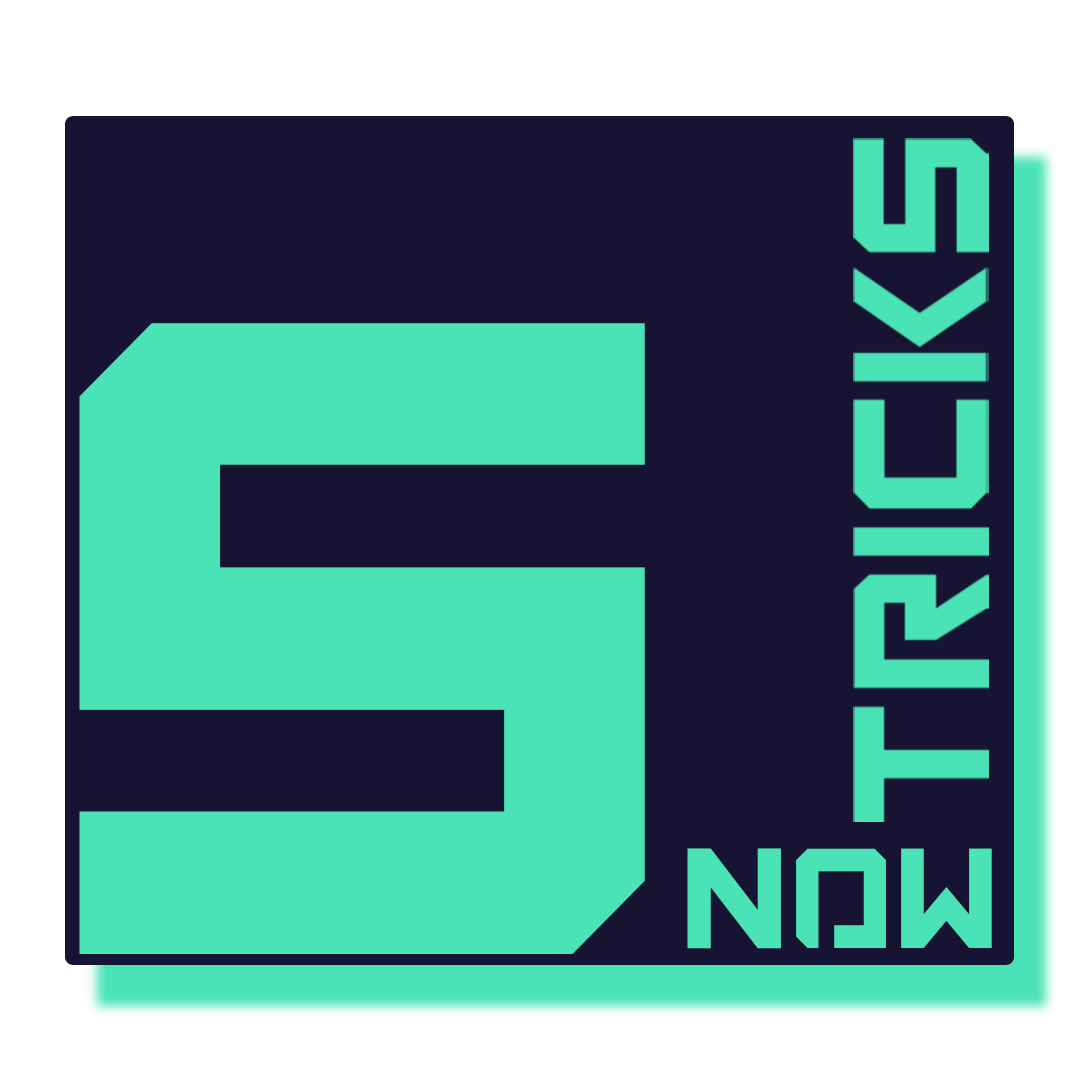
<style>
.page{position:relative;width:1080px;height:1080px;background:#171332}
.page>*{position:absolute;margin:0}
.t1{font:950px "Loaded";color:#4ae3b5}
.t2{font:150px "Loaded";color:#4ae3b5}
</style>
<div class="page">
<p class="t1" style="left:79px;top:323px;width:566px;height:631px">S</p>
<p class="t2" style="left:687px;top:848px;width:305px;height:101px">now</p>
</div>
